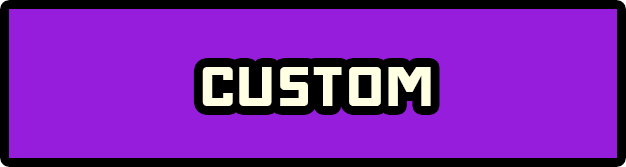
<style>
.page{position:relative;width:626px;height:167px;background:#971ddd}
.page>*{position:absolute;margin:0}
.t1{font:90px "ONRAMP";color:#ffffe3}
</style>
<div class="page">
<p class="t1" style="left:202px;top:67px;width:229px;height:39px">custom</p>
</div>
